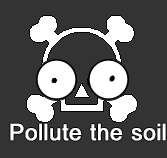
<style>
.page{position:relative;width:167px;height:158px;background:#333333}
.page>*{position:absolute;margin:0}
.t1{font:21.3px "HGPAGothic2Latin1K";color:#fefefe;font-weight:bold}
</style>
<div class="page">
<p class="t1" style="left:10px;top:123px;width:156px;height:18px">Pollute the soil</p>
</div>
